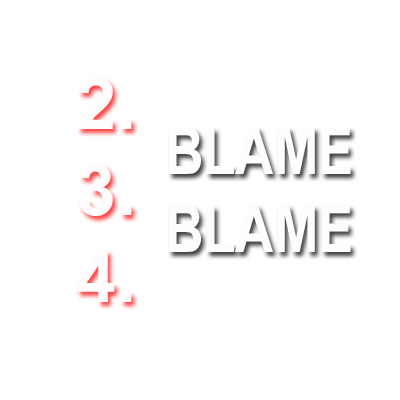
<style>
.page{position:relative;width:400px;height:400px;background:#ffffff}
.page>*{position:absolute;margin:0}
.t1{font:65.3px "Arial-BoldMT";color:#fefcfc;scale:0.81 1}
</style>
<div class="page">
<p class="t1" style="left:168px;top:127px;width:183px;height:125px;text-align:center">BLAME<br>BLAME</p>
</div>
